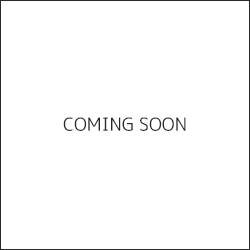
<style>
.page{position:relative;width:250px;height:250px;background:#ffffff}
.page>*{position:absolute;margin:0}
.t1{font:18px "migu-1c-regular";color:#292929}
</style>
<div class="page">
<p class="t1" style="left:63px;top:117px;width:123px;height:14px">COMING SOON</p>
</div>
